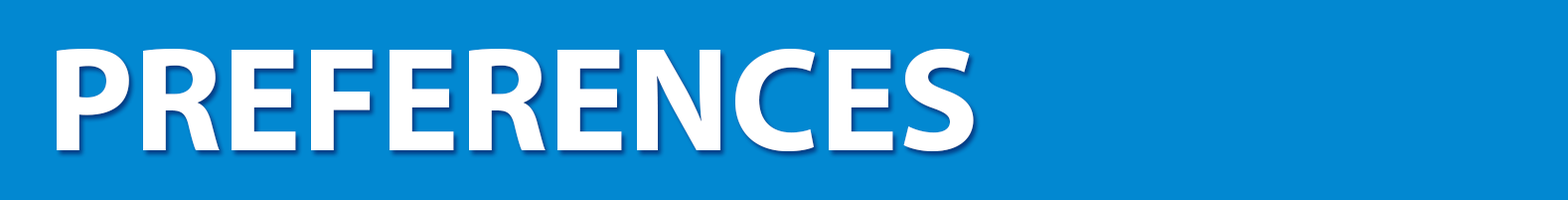
<style>
.page{position:relative;width:1568px;height:200px;background:#0288d1}
.page>*{position:absolute;margin:0}
.t1{font:149px "MyriadPro-Bold";color:#ffffff}
</style>
<div class="page">
<p class="t1" style="left:57px;top:49px;width:917px;height:102px">PREFERENCES</p>
</div>
